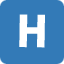
<style>
.page{position:relative;width:64px;height:64px;background:#337ab7}
.page>*{position:absolute;margin:0}
.t1{font:48.9px "FranklinGothic-Demi";color:#ffffff}
</style>
<div class="page">
<p class="t1" style="left:19px;top:14px;width:26px;height:34px;rotate:1deg">H</p>
</div>
